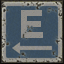
<style>
.page{position:relative;width:64px;height:64px}
.page>*{position:absolute;margin:0}
.t1{font:37.1px "Arial-BoldMT";color:#918f8d;font-weight:bold;scale:1.06 1}
</style>
<div class="page">
<p class="t1" style="left:21px;top:10px;width:22px;height:28px">E</p>
</div>
